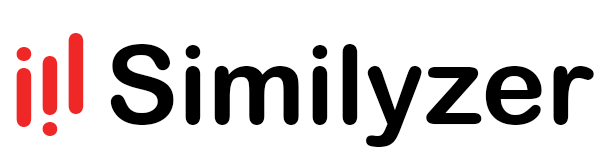
<style>
.page{position:relative;width:600px;height:160px;background:#ffffff}
.page>*{position:absolute;margin:0}
.t1{font:110px "ArialRoundedMTBold";color:#ef2727}
.t2{font:110px "ArialRoundedMTBold";color:#000000}
</style>
<div class="page">
<p class="t1" style="left:68px;top:33px;width:16px;height:81px">l</p>
<p class="t1" style="left:16px;top:47px;width:16px;height:80px">i</p>
<p class="t2" style="left:110px;top:44px;width:484px;height:103px">Similyzer</p>
<p class="t1" style="left:42px;top:56px;width:16px;height:80px">i</p>
</div>
